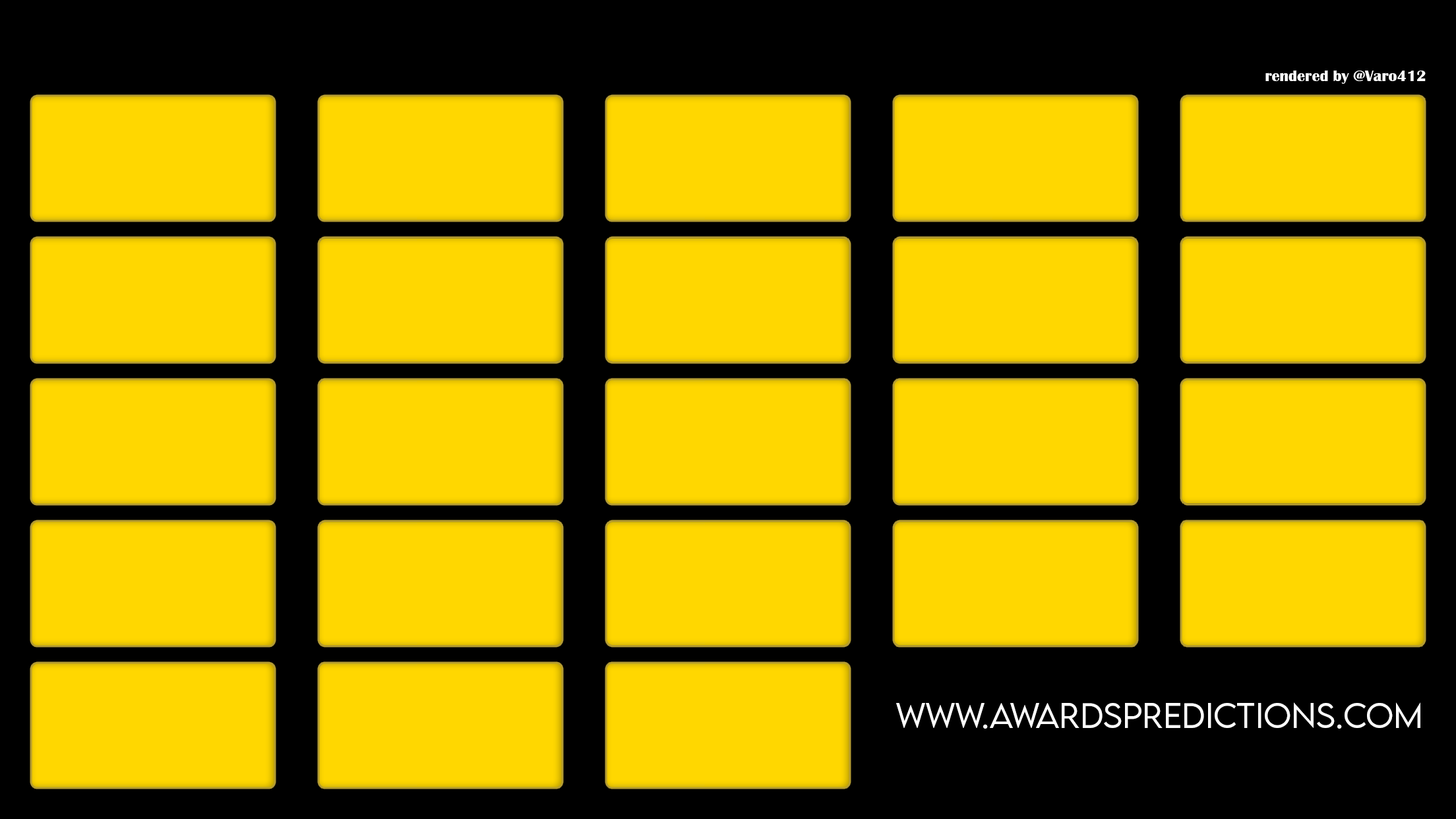
<style>
.page{position:relative;width:1456px;height:819px;background:#ffd700}
.page>*{position:absolute;margin:0}
.t1{font:15.8px "BritannicBold";color:#ffffff}
.t2{font:31.4px "LEMONMILK-Light";color:#ffffff}
</style>
<div class="page">
<p class="t1" style="left:1265px;top:70px;width:161px;height:14px">rendered by @Varo412</p>
<p class="t2" style="left:896px;top:702px;width:524px;height:27px">www.awardspredictions.com</p>
</div>
